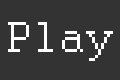
<style>
.page{position:relative;width:120px;height:80px;background:#333333}
.page>*{position:absolute;margin:0}
.t1{font:48px "Courier";color:#ffffff}
</style>
<div class="page">
<p class="t1" style="left:8px;top:22px;width:105px;height:39px">Play</p>
</div>
